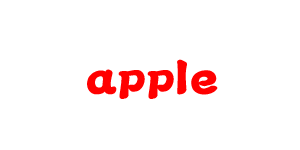
<style>
.page{position:relative;width:300px;height:150px;background:#ffffff}
.page>*{position:absolute;margin:0}
.t1{font:48px "Yj-BACDOO-Bold";color:#ff0000}
</style>
<div class="page">
<p class="t1" style="left:87px;top:59px;width:131px;height:40px">apple</p>
</div>
